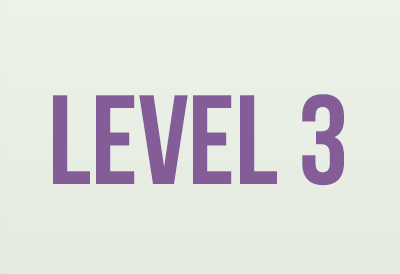
<style>
.page{position:relative;width:400px;height:274px}
.page>*{position:absolute;margin:0}
.t1{font:126.6px "BebasNeueBold";color:#835c98}
</style>
<div class="page">
<p class="t1" style="left:53px;top:94px;width:291px;height:92px">LEVEL 3</p>
</div>
